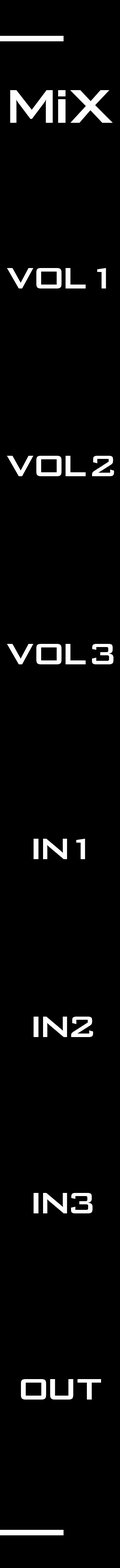
<style>
.page{position:relative;width:120px;height:1568px;background:#000000}
.page>*{position:absolute;margin:0}
.t1{font:63px "BankGothicBT-Medium";letter-spacing:-0.08em;color:#ffffff}
.t2{font:45.7px "Arial-Black";letter-spacing:-0.08em;color:#ffffff;scale:0.81 1}
.t3{font:39.4px "BankGothicBT-Medium";color:#ffffff}
.t4{font:39.4px "BankGothicBT-Medium";letter-spacing:-0.06em;color:#ffffff}
.t5{font:39.4px "BankGothicBT-Medium";letter-spacing:-0.14em;color:#ffffff}
.t6{font:39.4px "BankGothicBT-Medium";letter-spacing:-0.04em;color:#ffffff}
</style>
<div class="page">
<p class="t1" style="left:10px;top:90px;width:103px;height:33px">M X</p>
<p class="t2" style="left:58px;top:90px;width:7px;height:33px">i</p>
<p class="t3" style="left:7px;top:268px;width:99px;height:20px"><span class="t4">V</span><span class="t5">O</span>L1</p>
<p class="t3" style="left:7px;top:456px;width:107px;height:20px"><span class="t4">V</span><span class="t5">O</span>L2</p>
<p class="t3" style="left:7px;top:644px;width:106px;height:20px"><span class="t4">V</span><span class="t5">O</span>L3</p>
<p class="t5" style="left:33px;top:839px;width:52px;height:20px">IN1</p>
<p class="t5" style="left:33px;top:1017px;width:60px;height:20px">IN2</p>
<p class="t5" style="left:33px;top:1193px;width:59px;height:20px">IN3</p>
<p class="t5" style="left:21px;top:1379px;width:80px;height:21px">O<span class="t6">U</span><span class="t3">T</span></p>
</div>
